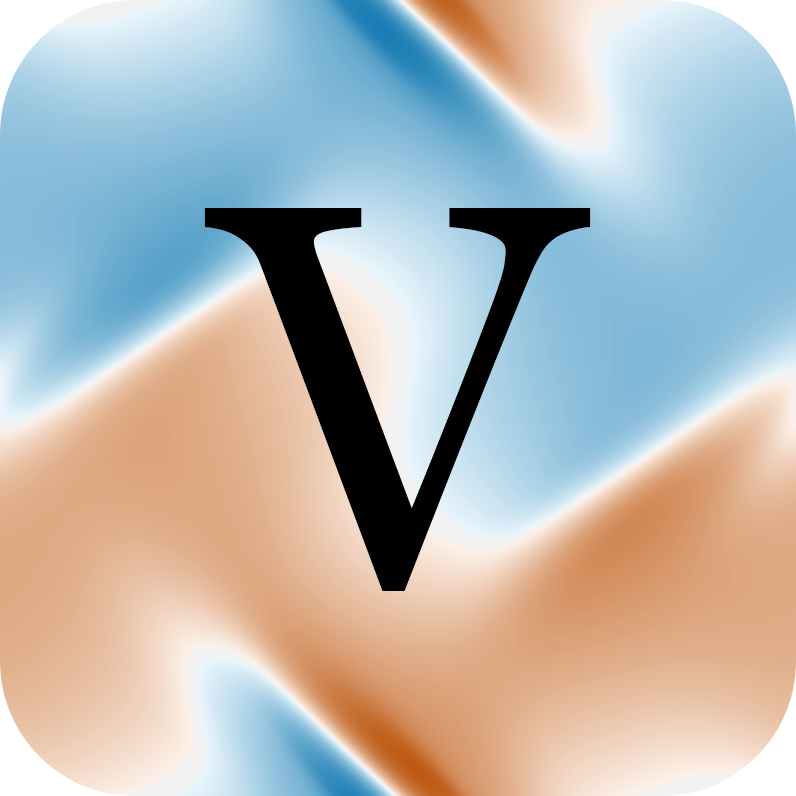
<style>
.page{position:relative;width:796px;height:796px}
.page>*{position:absolute;margin:0}
.t1{font:546.3px "Georgia";color:#000000}
</style>
<div class="page">
<p class="t1" style="left:204px;top:208px;width:387px;height:383px">V</p>
</div>
